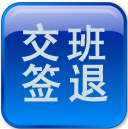
<style>
.page{position:relative;width:128px;height:129px}
.page>*{position:absolute;margin:0}
.t1{font:40.4px/40.4px "SimHei";letter-spacing:0.2em;color:#d0dee3;font-weight:bold}
</style>
<div class="page">
<p class="t1" style="left:21px;top:23px;width:87px;height:80px">交班<br>签退</p>
</div>
